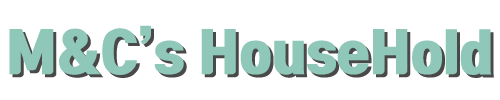
<style>
.page{position:relative;width:500px;height:100px;background:#ffffff}
.page>*{position:absolute;margin:0}
.t1{font:52px "TmonMonsoriOTFBlack";color:#8fc7b8;scale:1.05 1}
</style>
<div class="page">
<p class="t1" style="left:9px;top:25px;width:482px;height:50px">M&amp;C’s HouseHold</p>
<p class="t1" style="left:12px;top:28px;width:482px;height:50px">M&amp;C’s HouseHold</p>
</div>
